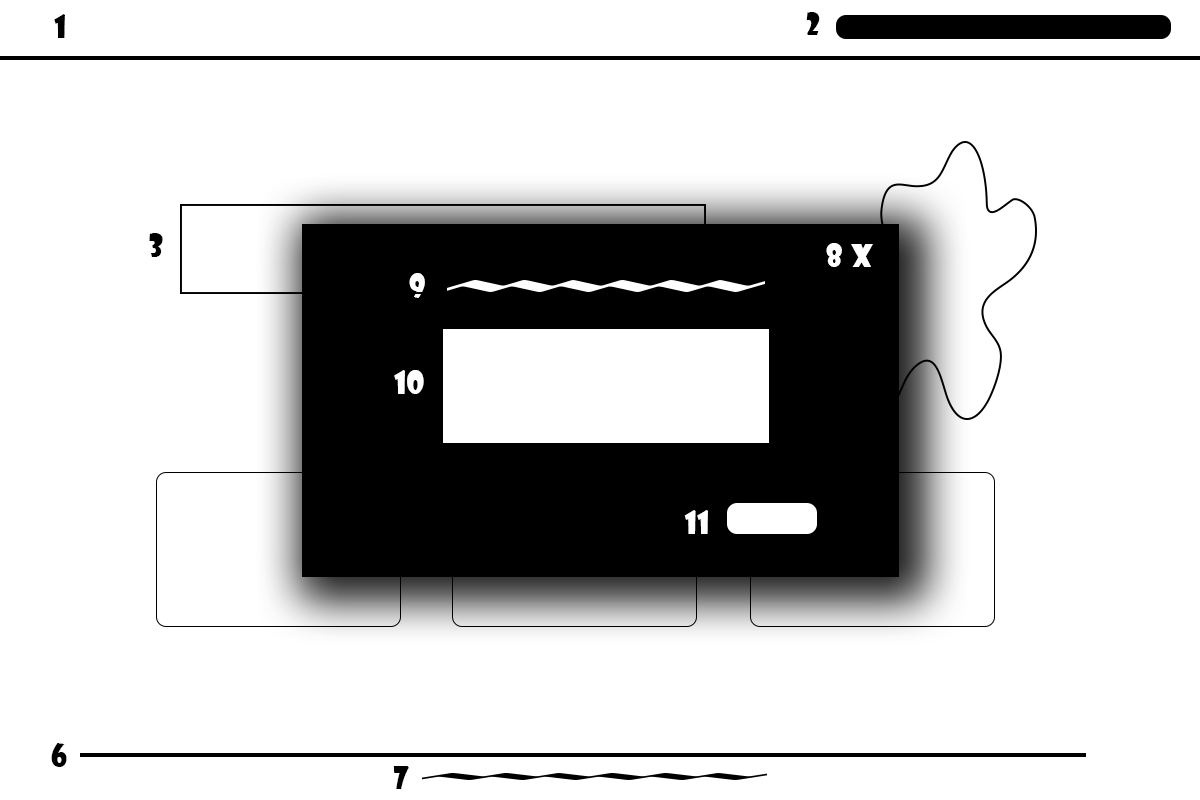
<style>
.page{position:relative;width:1200px;height:800px;background:#ffffff}
.page>*{position:absolute;margin:0}
.t1{font:30px "ShowcardGothic-Reg";color:#000000}
.t2{font:30px "ShowcardGothic-Reg";color:#ffffff}
.t3{font:30px "ShowcardGothic-Reg";color:#fffefe}
</style>
<div class="page">
<p class="t1" style="left:54px;top:14px;width:11px;height:24px">1</p>
<p class="t1" style="left:806px;top:12px;width:14px;height:23px">2</p>
<p class="t1" style="left:149px;top:233px;width:14px;height:24px">3</p>
<p class="t2" style="left:826px;top:243px;width:16px;height:24px">8</p>
<p class="t3" style="left:851px;top:244px;width:22px;height:23px">x</p>
<p class="t2" style="left:409px;top:273px;width:16px;height:25px">9</p>
<p class="t2" style="left:394px;top:370px;width:30px;height:24px">10</p>
<p class="t2" style="left:684px;top:510px;width:24px;height:24px">11</p>
<p class="t1" style="left:51px;top:743px;width:16px;height:24px">6</p>
<p class="t1" style="left:393px;top:766px;width:16px;height:24px">7</p>
</div>
